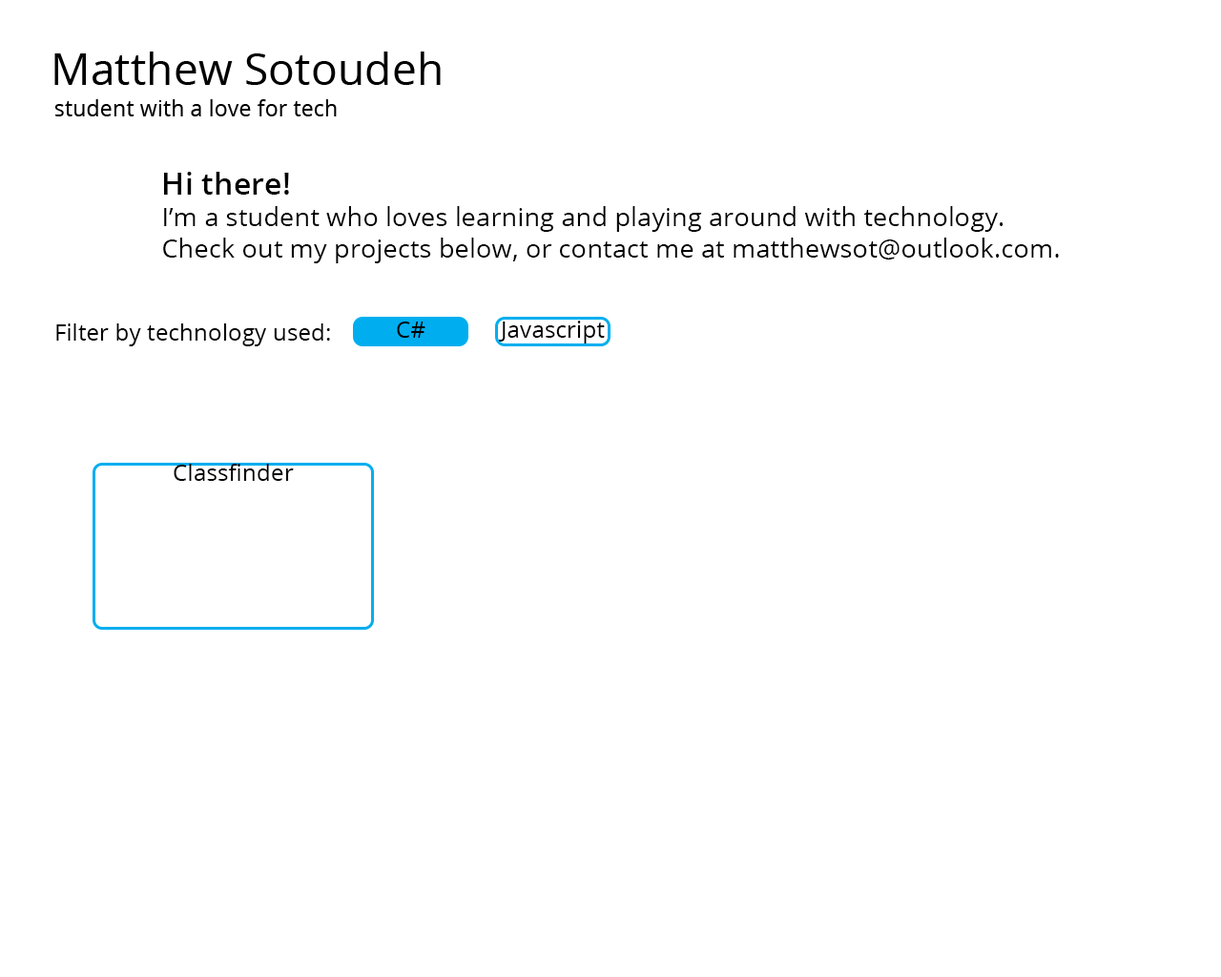
<style>
.page{position:relative;width:1221px;height:977px;background:#ffffff}
.page>*{position:absolute;margin:0}
.t1{font:26.2px "OpenSans";color:#000000}
.t2{font:30.9px "OpenSans-Semibold";color:#000000}
.t3{font:23.3px "OpenSans";color:#000000}
</style>
<div class="page">
<p class="t1" style="left:163px;top:172px;width:896px;height:91px"><span class="t2">Hi there!<br></span>I’m a student who loves learning and playing around with technology.<br>Check out my projects below, or contact me at matthewsot@outlook.com.</p>
<p class="t3" style="left:56px;top:323px;width:274px;height:23px">Filter by technology used:</p>
<p class="t3" style="left:397px;top:321px;width:28px;height:17px">C#</p>
<p class="t3" style="left:499px;top:320px;width:106px;height:23px">Javascript</p>
<p class="t3" style="left:174px;top:464px;width:120px;height:17px">Classfinder</p>
</div>
